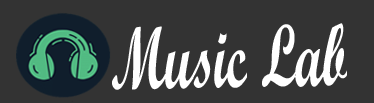
<style>
.page{position:relative;width:374px;height:103px;background:#333333}
.page>*{position:absolute;margin:0}
.t1{font:88.3px "ScriptMTBold";color:#ffffff;scale:0.61 1}
</style>
<div class="page">
<p class="t1" style="left:112px;top:23px;width:235px;height:67px;rotate:-1deg">Music Lab</p>
</div>
